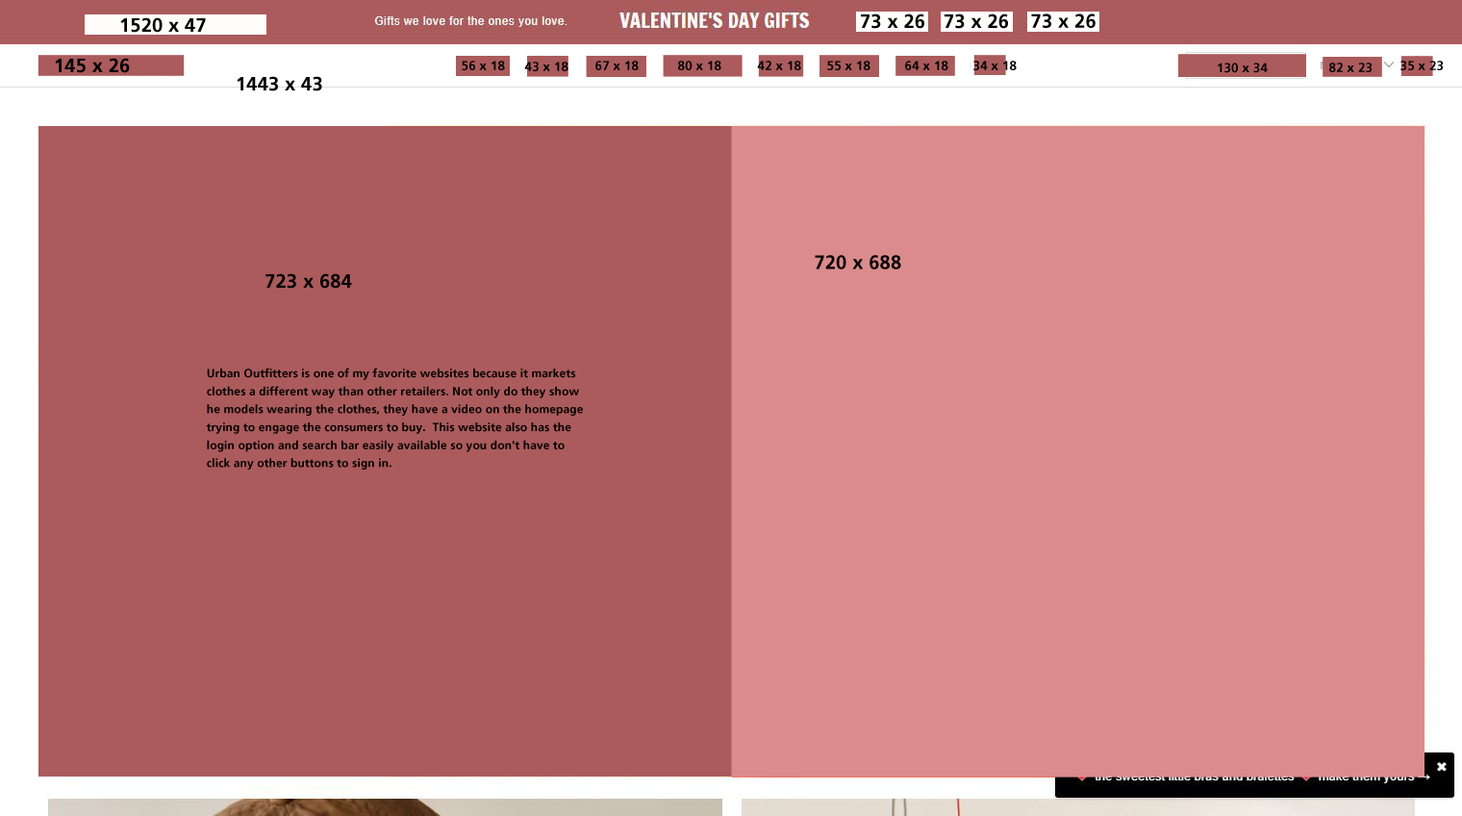
<style>
.page{position:relative;width:1462px;height:816px;background:#ab5b5c}
.page>*{position:absolute;margin:0}
.t1{font:19.2px "FrutigerLTStd-Bold";letter-spacing:0.01em;color:#000000}
.t2{font:12.8px "FrutigerLTStd-Bold";letter-spacing:0.01em;color:#000000}
.t3{font:19.2px "FrutigerLTStd-Bold";letter-spacing:0.01em;color:#060000}
.t4{font:11.5px/18px "FrutigerLTStd-Bold";letter-spacing:0.01em;color:#060000}
</style>
<div class="page">
<p class="t1" style="left:120px;top:17px;width:86px;height:16px">1520 x 47</p>
<p class="t1" style="left:861px;top:13px;width:63px;height:16px">73 x 26</p>
<p class="t1" style="left:945px;top:13px;width:63px;height:16px">73 x 26</p>
<p class="t1" style="left:1031px;top:13px;width:65px;height:15px">73 x 26</p>
<p class="t1" style="left:55px;top:58px;width:75px;height:15px">145 x 26</p>
<p class="t2" style="left:462px;top:61px;width:43px;height:9px">56 x 18</p>
<p class="t2" style="left:524px;top:62px;width:44px;height:9px">43 x 18</p>
<p class="t2" style="left:595px;top:61px;width:44px;height:9px">67 x 18</p>
<p class="t2" style="left:678px;top:61px;width:43px;height:9px">80 x 18</p>
<p class="t2" style="left:757px;top:61px;width:44px;height:9px">42 x 18</p>
<p class="t2" style="left:827px;top:61px;width:43px;height:9px">55 x 18</p>
<p class="t2" style="left:905px;top:61px;width:43px;height:9px">64 x 18</p>
<p class="t2" style="left:973px;top:61px;width:44px;height:9px">34 x 18</p>
<p class="t2" style="left:1218px;top:63px;width:50px;height:10px">130 x 34</p>
<p class="t2" style="left:1329px;top:63px;width:43px;height:9px">82 x 23</p>
<p class="t2" style="left:1400px;top:61px;width:43px;height:9px">35 x 23</p>
<p class="t1" style="left:237px;top:76px;width:85px;height:15px">1443 x 43</p>
<p class="t3" style="left:815px;top:255px;width:86px;height:14px">720 x 688</p>
<p class="t3" style="left:265px;top:273px;width:87px;height:16px">723 x 684</p>
<p class="t4" style="left:206px;top:367px;width:377px;height:102px">Urban Outfitters is one of my favorite websites because it markets clothes a different way than other retailers. Not only do they show he models wearing the clothes, they have a video on the homepage trying to engage the consumers to buy.  This website also has the login option and search bar easily available so you don't have to click any other buttons to sign in.</p>
</div>
